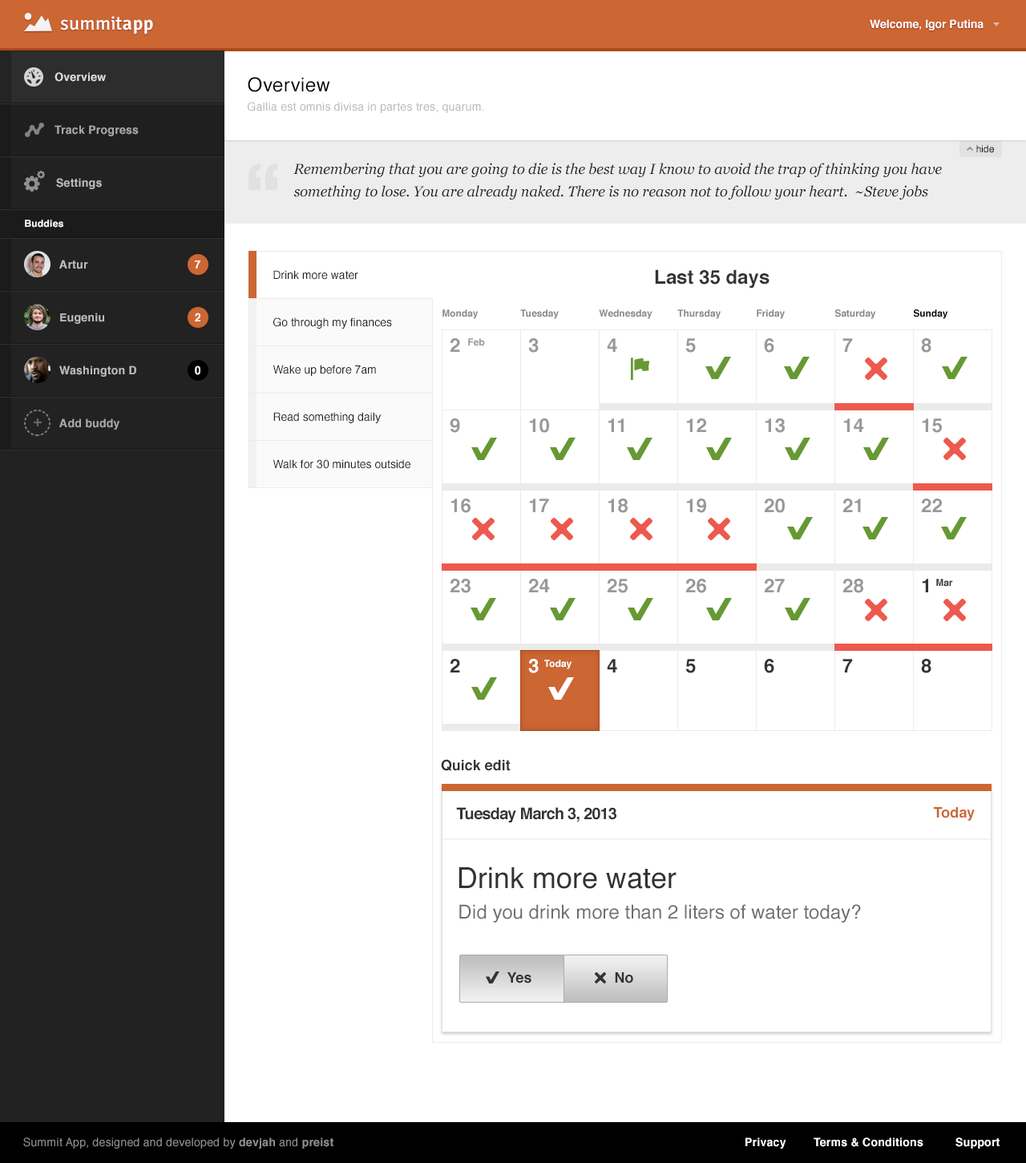
<style>
.page{position:relative;width:1026px;height:1163px;background:#ffffff}
.page>*{position:absolute;margin:0}
.t1{font:19.2px "Signika-Regular";letter-spacing:0.02em;color:#ffffff}
.t2{font:19.2px "Signika-Semibold";letter-spacing:0.02em;color:#ffffff}
.t3{font:11.2px "Helvetica-Bold";color:#ffffff}
.t4{font:11.2px "Helvetica-Bold";letter-spacing:0.02em;color:#e0e0e0}
.t5{font:19.2px "Helvetica";letter-spacing:0.02em;color:#000000}
.t6{font:11.2px "Helvetica";letter-spacing:0.02em;color:#b8b8b8}
.t7{font:11.2px "Helvetica-Bold";letter-spacing:0.02em;color:#a9a9a9}
.t8{font:9.6px "Helvetica";color:#000000}
.t9{font:14.4px/22.4px "Georgia-Italic";color:#1f1f1f}
.t10{font:11.2px "Helvetica-Bold";letter-spacing:0.02em;color:#bcbcbc}
.t11{font:9.6px "Helvetica-Bold";letter-spacing:0.02em;color:#ffffff}
.t12{font:11.2px "Helvetica-Bold";letter-spacing:0.02em;color:#ffffff}
.t13{font:19.2px "Helvetica-Bold";color:#333333}
.t14{font:11.2px "Helvetica";color:#1f1f1f}
.t15{font:9.6px "Helvetica-Bold";color:#888888}
.t16{font:9.6px "Helvetica-Bold";color:#000000}
.t17{font:19.2px "Helvetica-Bold";color:#999999}
.t18{font:9.6px "Helvetica-Bold";color:#999999}
.t19{font:9.6px "Helvetica-Bold";color:#333333}
.t20{font:19.2px "Helvetica-Bold";color:#ffffff}
.t21{font:9.6px "Helvetica-Bold";color:#ffffff}
.t22{font:14.4px "Helvetica-Bold";color:#333333}
.t23{font:16px "Helvetica-Bold";letter-spacing:-0.04em;color:#333333}
.t24{font:14.4px "Helvetica-Bold";color:#cc6633}
.t25{font:28.8px "Helvetica";color:#333333}
.t26{font:19.2px "Helvetica";color:#6e6e6e}
.t27{font:11.2px "Helvetica";letter-spacing:0.02em;color:#8d8d8d}
.t28{font:11.2px "Helvetica-Bold";letter-spacing:0.02em;color:#8d8d8d}
</style>
<div class="page">
<p class="t1" style="left:60px;top:16px;width:93px;height:18px">summit<span class="t2">app</span></p>
<p class="t3" style="left:869px;top:19px;width:114px;height:11px">Welcome, Igor Putina</p>
<p class="t4" style="left:54px;top:72px;width:52px;height:10px">Overview</p>
<p class="t5" style="left:248px;top:77px;width:82px;height:15px">Overview</p>
<p class="t6" style="left:248px;top:102px;width:236px;height:11px">Gallia est omnis divisa in partes tres, quarum.</p>
<p class="t7" style="left:54px;top:125px;width:85px;height:11px">Track Progress</p>
<p class="t8" style="left:976px;top:145px;width:18px;height:8px">hide</p>
<p class="t9" style="left:293px;top:163px;width:648px;height:37px">Remembering that you are going to die is the best way I know to avoid the trap of thinking you have something to lose. You are already naked. There is no reason not to follow your heart.  ~Steve jobs</p>
<p class="t10" style="left:56px;top:178px;width:46px;height:11px">Settings</p>
<p class="t11" style="left:25px;top:220px;width:38px;height:8px">Buddies</p>
<p class="t10" style="left:59px;top:260px;width:29px;height:9px">Artur</p>
<p class="t12" style="left:195px;top:260px;width:5px;height:8px">7</p>
<p class="t13" style="left:655px;top:269px;width:114px;height:19px">Last 35 days</p>
<p class="t14" style="left:273px;top:270px;width:85px;height:10px">Drink more water</p>
<p class="t10" style="left:60px;top:312px;width:44px;height:12px">Eugeniu</p>
<p class="t12" style="left:195px;top:312px;width:5px;height:9px">2</p>
<p class="t14" style="left:273px;top:317px;width:119px;height:12px">Go through my finances</p>
<p class="t15" style="left:442px;top:309px;width:36px;height:10px">Monday</p>
<p class="t15" style="left:520px;top:309px;width:38px;height:10px">Tuesday</p>
<p class="t15" style="left:599px;top:309px;width:53px;height:10px">Wednesday</p>
<p class="t15" style="left:677px;top:309px;width:43px;height:10px">Thursday</p>
<p class="t15" style="left:756px;top:309px;width:28px;height:10px">Friday</p>
<p class="t15" style="left:834px;top:309px;width:42px;height:10px">Saturday</p>
<p class="t16" style="left:913px;top:309px;width:35px;height:10px">Sunday</p>
<p class="t17" style="left:450px;top:338px;width:10px;height:14px">2</p>
<p class="t18" style="left:468px;top:338px;width:17px;height:8px">Feb</p>
<p class="t17" style="left:528px;top:338px;width:10px;height:15px">3</p>
<p class="t17" style="left:607px;top:338px;width:10px;height:14px">4</p>
<p class="t17" style="left:685px;top:338px;width:11px;height:15px">5</p>
<p class="t17" style="left:764px;top:338px;width:10px;height:15px">6</p>
<p class="t17" style="left:842px;top:338px;width:11px;height:14px">7</p>
<p class="t17" style="left:921px;top:338px;width:10px;height:15px">8</p>
<p class="t10" style="left:59px;top:365px;width:77px;height:12px">Washington D</p>
<p class="t12" style="left:195px;top:365px;width:5px;height:10px">0</p>
<p class="t14" style="left:273px;top:365px;width:103px;height:11px">Wake up before 7am</p>
<p class="t14" style="left:273px;top:412px;width:108px;height:11px">Read something daily</p>
<p class="t7" style="left:59px;top:418px;width:60px;height:11px">Add buddy</p>
<p class="t17" style="left:450px;top:418px;width:10px;height:15px">9</p>
<p class="t17" style="left:529px;top:418px;width:20px;height:15px">10</p>
<p class="t17" style="left:607px;top:418px;width:16px;height:14px">11</p>
<p class="t17" style="left:686px;top:418px;width:20px;height:14px">12</p>
<p class="t17" style="left:764px;top:418px;width:20px;height:15px">13</p>
<p class="t17" style="left:843px;top:418px;width:21px;height:14px">14</p>
<p class="t17" style="left:921px;top:418px;width:20px;height:15px">15</p>
<p class="t14" style="left:273px;top:459px;width:137px;height:10px">Walk for 30 minutes outside</p>
<p class="t17" style="left:450px;top:498px;width:20px;height:15px">16</p>
<p class="t17" style="left:529px;top:498px;width:20px;height:14px">17</p>
<p class="t17" style="left:607px;top:498px;width:20px;height:15px">18</p>
<p class="t17" style="left:686px;top:498px;width:20px;height:15px">19</p>
<p class="t17" style="left:764px;top:498px;width:20px;height:15px">20</p>
<p class="t17" style="left:842px;top:498px;width:19px;height:14px">21</p>
<p class="t17" style="left:921px;top:498px;width:20px;height:14px">22</p>
<p class="t17" style="left:450px;top:579px;width:20px;height:14px">23</p>
<p class="t17" style="left:528px;top:579px;width:22px;height:13px">24</p>
<p class="t17" style="left:607px;top:579px;width:20px;height:14px">25</p>
<p class="t17" style="left:685px;top:579px;width:21px;height:14px">26</p>
<p class="t17" style="left:764px;top:579px;width:20px;height:13px">27</p>
<p class="t17" style="left:842px;top:579px;width:21px;height:14px">28</p>
<p class="t13" style="left:921px;top:579px;width:7px;height:13px">1</p>
<p class="t19" style="left:936px;top:579px;width:17px;height:8px">Mar</p>
<p class="t13" style="left:450px;top:659px;width:10px;height:13px">2</p>
<p class="t20" style="left:528px;top:659px;width:10px;height:14px">3</p>
<p class="t21" style="left:544px;top:659px;width:27px;height:10px">Today</p>
<p class="t13" style="left:607px;top:659px;width:10px;height:13px">4</p>
<p class="t13" style="left:685px;top:659px;width:11px;height:14px">5</p>
<p class="t13" style="left:764px;top:659px;width:10px;height:14px">6</p>
<p class="t13" style="left:842px;top:659px;width:11px;height:13px">7</p>
<p class="t13" style="left:921px;top:659px;width:10px;height:14px">8</p>
<p class="t22" style="left:441px;top:759px;width:69px;height:12px">Quick edit</p>
<p class="t23" style="left:456px;top:807px;width:160px;height:16px">Tuesday March 3, 2013</p>
<p class="t24" style="left:933px;top:807px;width:41px;height:13px">Today</p>
<p class="t25" style="left:458px;top:867px;width:218px;height:22px">Drink more water</p>
<p class="t26" style="left:459px;top:904px;width:402px;height:18px">Did you drink more than 2 liters of water today?</p>
<p class="t22" style="left:507px;top:972px;width:24px;height:11px">Yes</p>
<p class="t22" style="left:615px;top:972px;width:18px;height:11px">No</p>
<p class="t27" style="left:23px;top:1137px;width:310px;height:11px">Summit App, designed and developed by <span class="t28">devjah </span>and <span class="t28">preist</span></p>
<p class="t12" style="left:745px;top:1137px;width:41px;height:11px">Privacy</p>
<p class="t12" style="left:813px;top:1137px;width:110px;height:10px">Terms &amp; Conditions</p>
<p class="t12" style="left:955px;top:1137px;width:44px;height:11px">Support</p>
</div>
